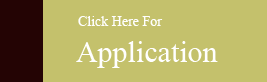
<style>
.page{position:relative;width:267px;height:82px;background:#c4c16c}
.page>*{position:absolute;margin:0}
.t1{font:14px "TimesNewRomanPSMT";color:#ffffff}
.t2{font:30px "TimesNewRomanPSMT";color:#ffffff}
</style>
<div class="page">
<p class="t1" style="left:76px;top:16px;width:142px;height:52px">Click Here For<br>  <span class="t2">Application</span></p>
</div>
